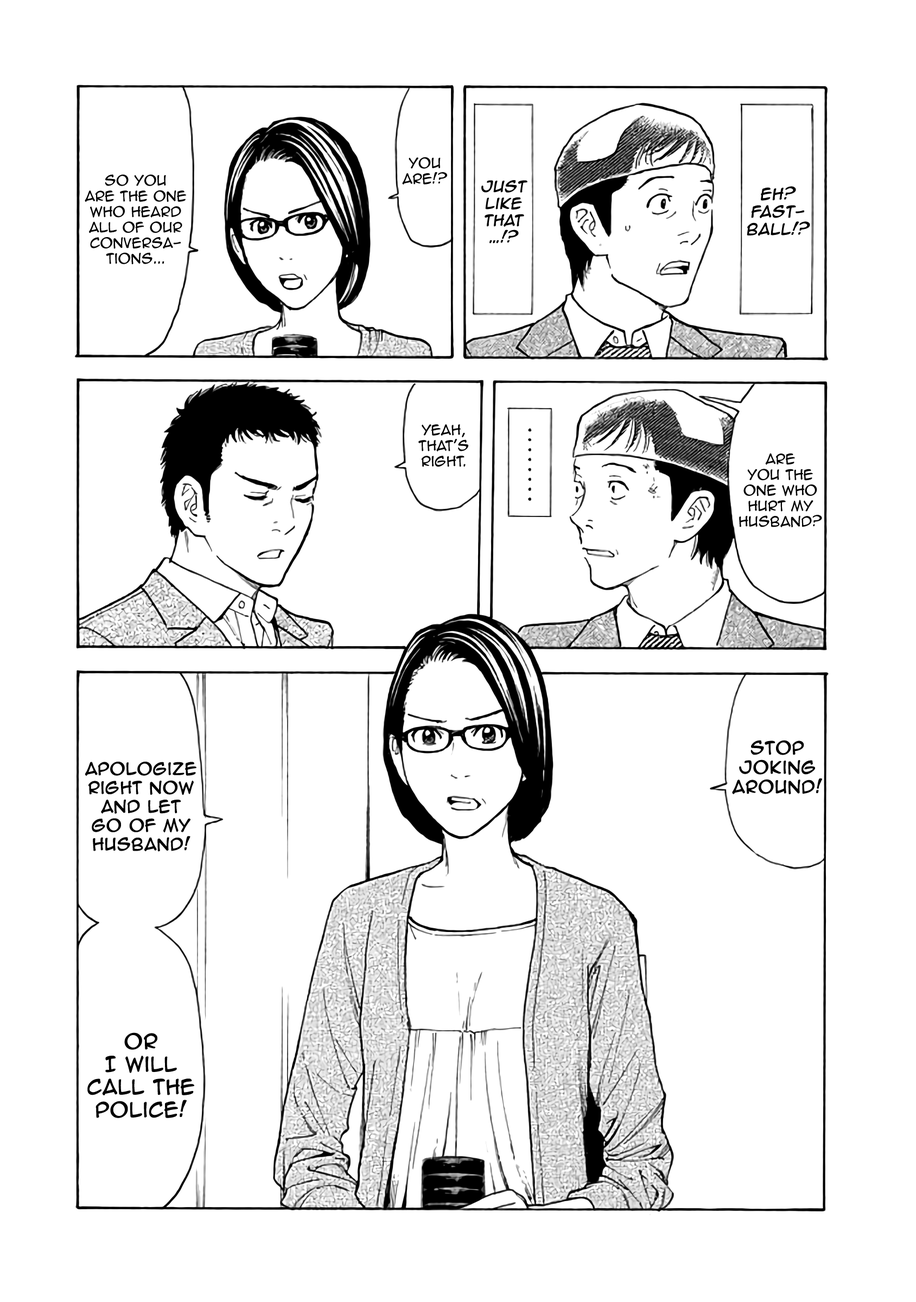
<style>
.page{position:relative;width:916px;height:1302px;background:#ffffff}
.page>*{position:absolute;margin:0}
.t1{font:13px "AnimeAce2.0BB";color:#000000}
.t2{font:14.1px "AnimeAce2.0BB";color:#000000;font-weight:bold;font-style:italic}
.t3{font:14.6px "AnimeAce2.0BB";color:#000000;font-weight:bold;font-style:italic}
.t4{font:16.3px "AnimeAce2.0BB";color:#000000;font-weight:bold}
.t5{font:15.7px "AnimeAce2.0BB";color:#000000;font-weight:bold}
.t6{font:19px "AnimeAce2.0BB";color:#000000;font-weight:bold}
</style>
<div class="page">
<p class="t1" style="left:402px;top:157px;width:45px;height:27px;text-align:center">You are!?</p>
<p class="t1" style="left:85px;top:174px;width:101px;height:90px;text-align:center">so you <br>are the one who heard <br>all of our<br>conversations...</p>
<p class="t2" style="left:481px;top:180px;width:46px;height:64px;text-align:center">Just like that<br>…!?</p>
<p class="t3" style="left:747px;top:186px;width:63px;height:50px;text-align:center">Eh? Fastball!?</p>
<p class="t1" style="left:418px;top:424px;width:50px;height:43px;text-align:center">Yeah, that's right.</p>
<p class="t1" style="left:739px;top:453px;width:83px;height:74px;text-align:center">are <br>you the <br>one who <br>hurt my <br>husband?</p>
<p class="t4" style="left:732px;top:740px;width:90px;height:54px;text-align:center">Stop joking around!</p>
<p class="t5" style="left:85px;top:762px;width:111px;height:90px;text-align:center">Apologize right now and let<br>go of my husband!</p>
<p class="t6" style="left:87px;top:1032px;width:107px;height:86px;text-align:center">or <br>I will call the police!</p>
</div>
